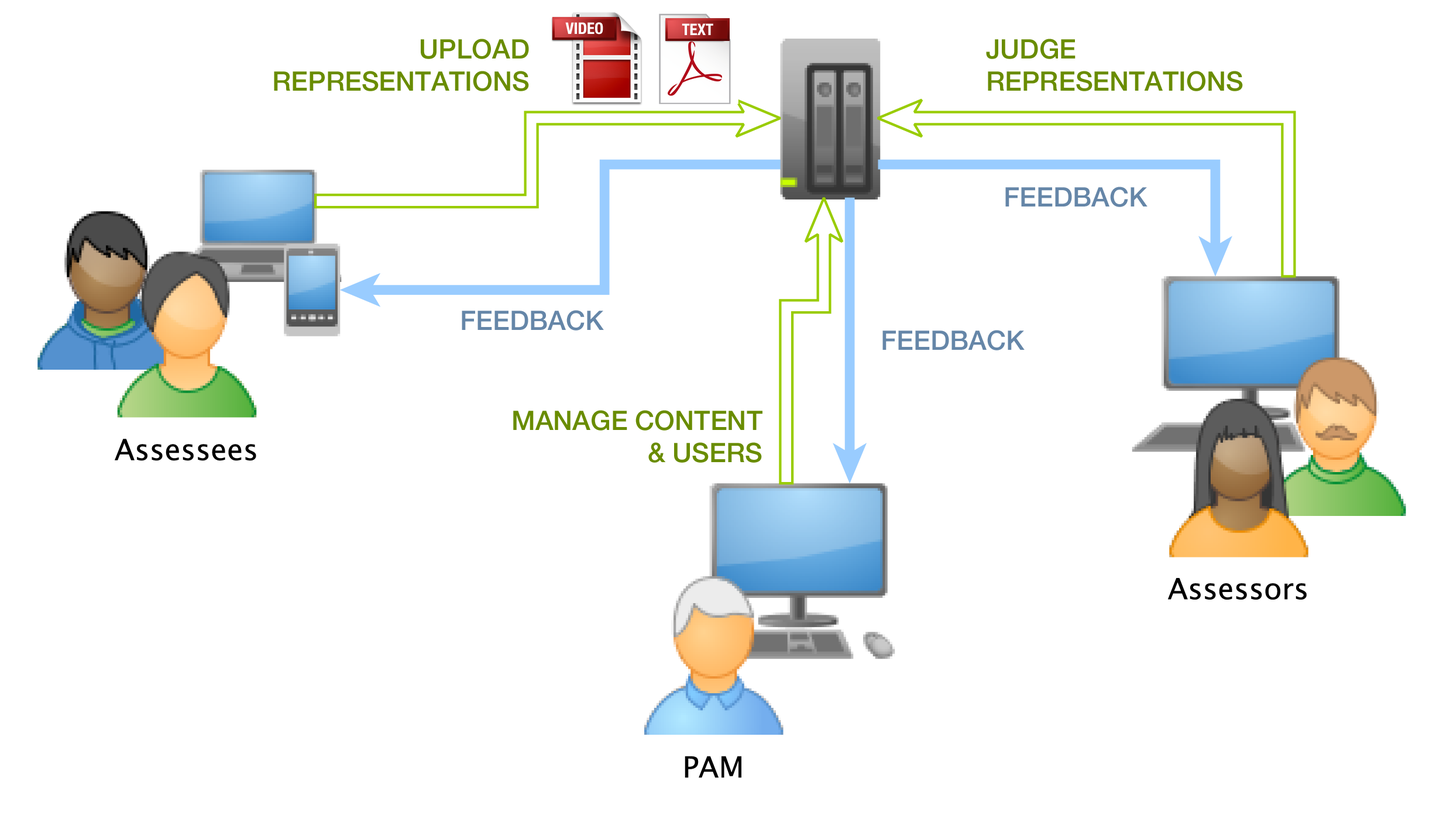
<style>
.page{position:relative;width:1443px;height:826px;background:#ffffff}
.page>*{position:absolute;margin:0}
.t1{font:15.9px "HelveticaNeue-CondensedBold";color:#ffffff}
.t2{font:26.8px "HelveticaNeue-Medium";color:#698c00}
.t3{font:26.8px "HelveticaNeue-Medium";color:#6586a8}
</style>
<div class="page">
<p class="t1" style="left:565px;top:22px;width:38px;height:13px">VIDEO</p>
<p class="t1" style="left:682px;top:23px;width:31px;height:12px">TEXT</p>
<p class="t2" style="left:274px;top:39px;width:255px;height:52px;text-align:right">UPLOAD<br>REPRESENTATIONS</p>
<p class="t2" style="left:986px;top:39px;width:257px;height:52px">JUDGE<br>REPRESENTATIONS</p>
<p class="t3" style="left:1005px;top:187px;width:143px;height:20px">FEEDBACK</p>
<p class="t3" style="left:462px;top:310px;width:142px;height:21px">FEEDBACK</p>
<p class="t3" style="left:882px;top:330px;width:143px;height:21px">FEEDBACK</p>
<p class="t2" style="left:513px;top:410px;width:250px;height:53px;text-align:right">MANAGE CONTENT<br>&amp; USERS</p>
</div>
